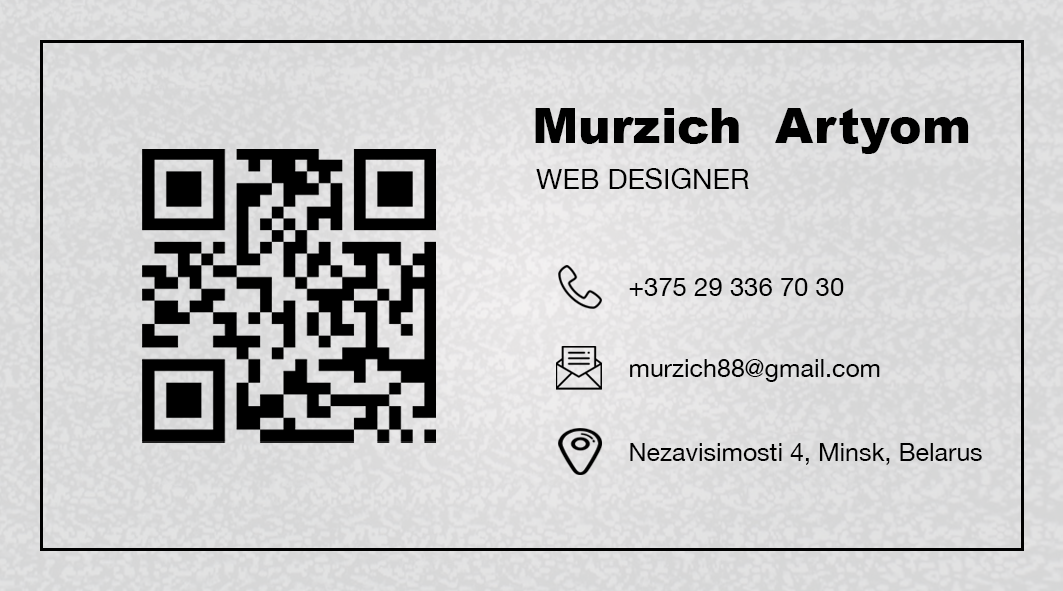
<style>
.page{position:relative;width:1063px;height:591px}
.page>*{position:absolute;margin:0}
.t1{font:49.4px "Arial-Black";color:#000000}
.t2{font:28.5px "HelveticaNeue";color:#000000}
.t3{font:25.7px "HelveticaNeue";color:#000000}
.t4{font:25px "HelveticaNeue";color:#000000}
</style>
<div class="page">
<p class="t1" style="left:535px;top:108px;width:434px;height:46px">Murzich  Artyom</p>
<p class="t2" style="left:536px;top:168px;width:213px;height:21px">WEB DESIGNER</p>
<p class="t3" style="left:629px;top:278px;width:215px;height:18px">+375 29 336 70 30</p>
<p class="t4" style="left:630px;top:359px;width:250px;height:23px">murzich88@gmail.com</p>
<p class="t4" style="left:630px;top:443px;width:352px;height:22px">Nezavisimosti 4, Minsk, Belarus</p>
</div>
